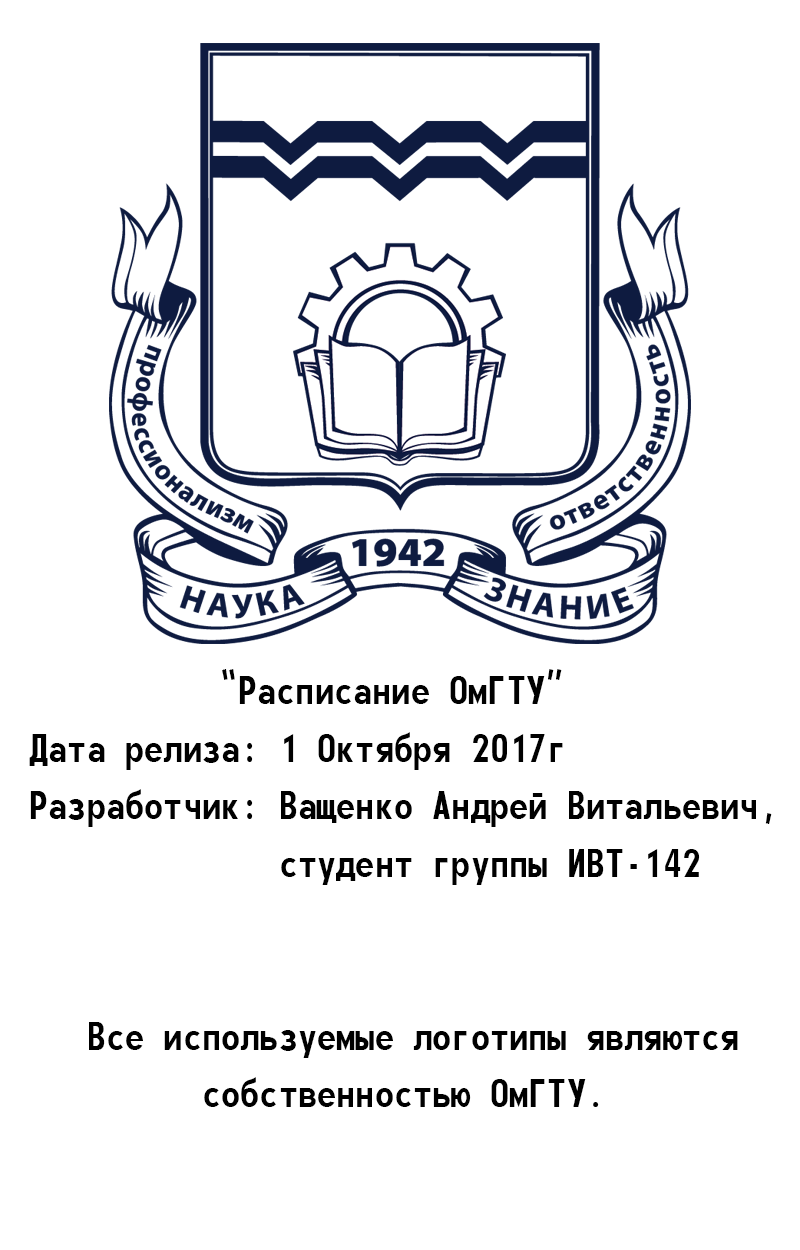
<style>
.page{position:relative;width:800px;height:1250px;background:#ffffff}
.page>*{position:absolute;margin:0}
.t1{font:48px "Monofonto";color:#000000}
.t2{font:48px "TimesNewRomanPSMT";color:#000000}
</style>
<div class="page">
<p class="t1" style="left:29px;top:669px;width:743px;height:438px"><span class="t2">   </span>        «Расписание ОмГТУ»<br>Дата релиза: 1 Октября 2017г<br>Разработчик: Ващенко Андрей Витальевич,<br>             студент группы ИВТ-142<br><br><br>   Все используемые логотипы являются<br>         собственностью ОмГТУ.</p>
</div>
